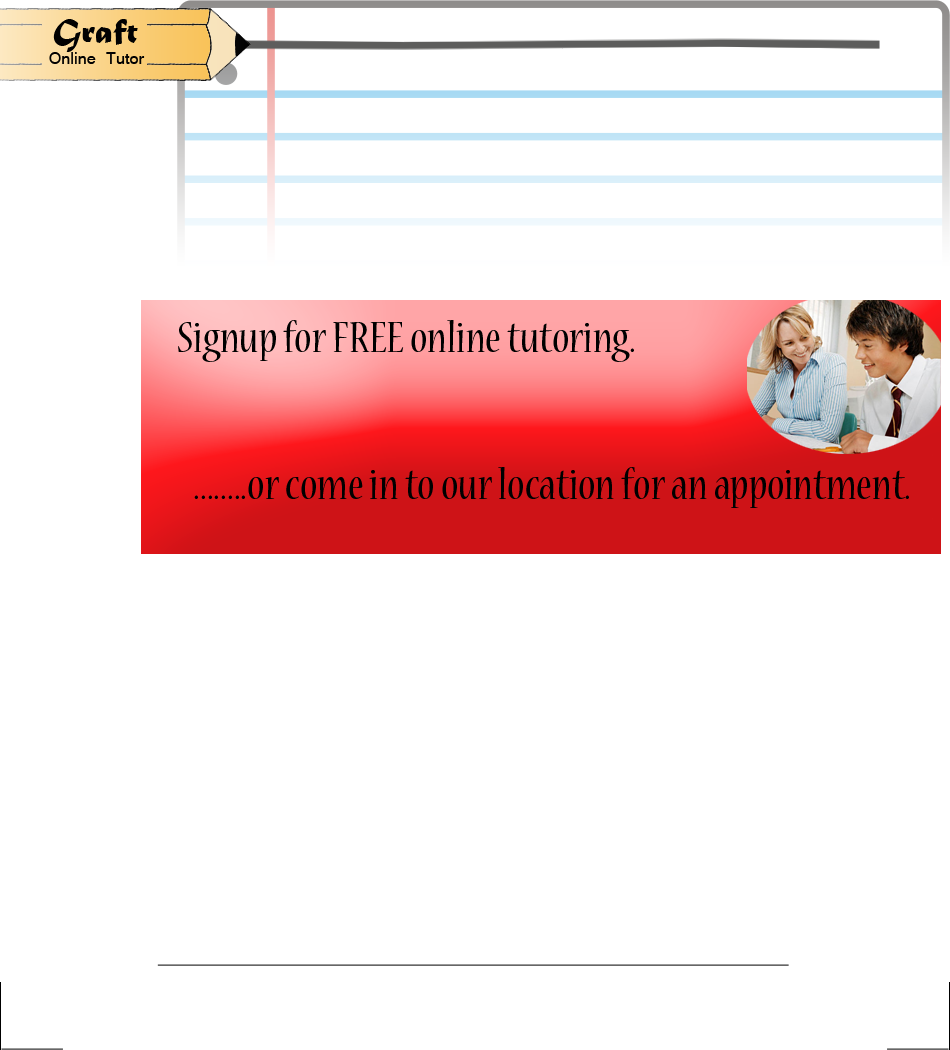
<style>
.page{position:relative;width:950px;height:1050px;background:#ffffff}
.page>*{position:absolute;margin:0}
.t1{font:36px "MaturaMTScriptCapitals";color:#010101}
.t2{font:18px "Latha";color:#010101}
.t3{font:48px "NuevaStd-Cond";color:#000000}
</style>
<div class="page">
<p class="t1" style="left:53px;top:19px;width:85px;height:33px">Graft</p>
<p class="t2" style="left:49px;top:52px;width:96px;height:12px">Online Tutor</p>
<p class="t3" style="left:178px;top:320px;width:456px;height:42px">Signup for FREE online tutoring.</p>
<p class="t3" style="left:194px;top:467px;width:715px;height:41px">........or come in to our location for an appointment.</p>
</div>
